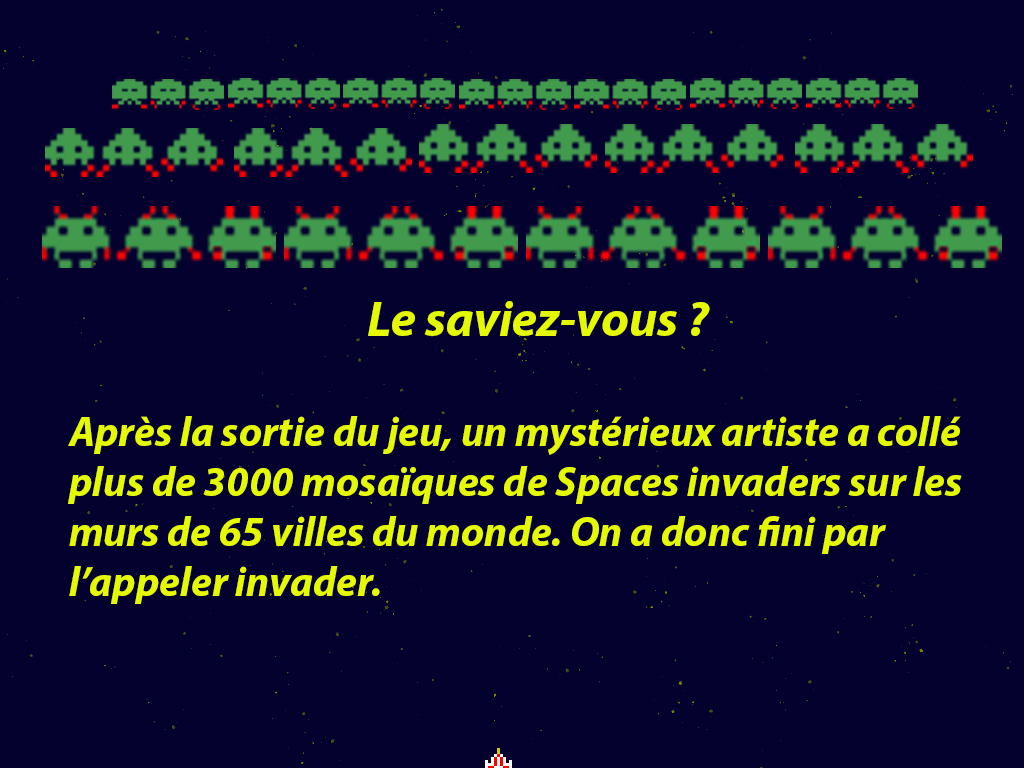
<style>
.page{position:relative;width:1024px;height:768px;background:#04012f}
.page>*{position:absolute;margin:0}
.t1{font:41.7px "MyriadPro-BoldIt";color:#e5fa00}
.t2{font:50px "MyriadPro-BoldIt";color:#e5fa00}
</style>
<div class="page">
<p class="t1" style="left:68px;top:301px;width:894px;height:303px;text-align:center"><span class="t2">Le saviez-vous ?<br><br></span>Après la sortie du jeu, un mystérieux artiste a collé plus de 3000 mosaïques de Spaces invaders sur les murs de 65 villes du monde. On a donc fini par l’appeler invader.</p>
</div>
